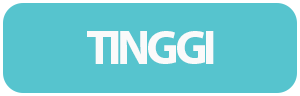
<style>
.page{position:relative;width:300px;height:96px;background:#56c4ce}
.page>*{position:absolute;margin:0}
.t1{font:48px "MyriadPro-Bold";letter-spacing:-0.09em;color:#fafafa}
</style>
<div class="page">
<p class="t1" style="left:87px;top:31px;width:127px;height:33px">TINGGI</p>
</div>
